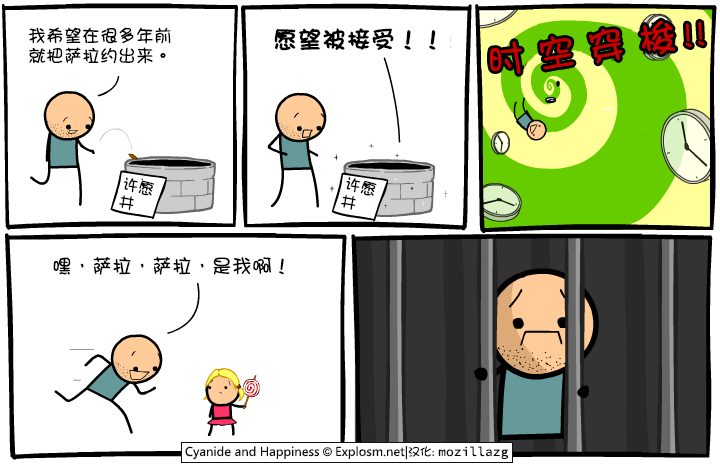
<style>
.page{position:relative;width:720px;height:470px;background:#ffffff}
.page>*{position:absolute;margin:0}
.t1{font:18px/20px "DFGirl";color:#000000}
.t2{font:24px "DFGirl";color:#000000;font-weight:bold}
.t3{font:38px "DFGirl";letter-spacing:0.34em;color:#cc0000}
.t4{font:38px "DFGirl";letter-spacing:0.16em;color:#cc0000}
.t5{font:36px "DFGirl";letter-spacing:0.06em;color:#cc0000}
.t6{font:16px/18px "DFGirl";color:#000000}
.t7{font:20px "DFGirl";color:#000000}
</style>
<div class="page">
<p class="t1" style="left:28px;top:27px;width:143px;height:37px">我希望在很多年前<br>就把萨拉约出来。</p>
<p class="t2" style="left:274px;top:28px;width:162px;height:23px">愿望被接受！！</p>
<p class="t3" style="left:490px;top:20px;width:215px;height:54px;rotate:-8deg">时空穿<span class="t4">梭</span><span class="t5">!!</span></p>
<p class="t6" style="left:119px;top:177px;width:36px;height:34px;rotate:12deg">许愿<br>井</p>
<p class="t6" style="left:341px;top:177px;width:36px;height:33px;rotate:14deg">许愿<br>井</p>
<p class="t7" style="left:53px;top:256px;width:231px;height:19px">嘿，萨拉，萨拉，是我啊！</p>
</div>
